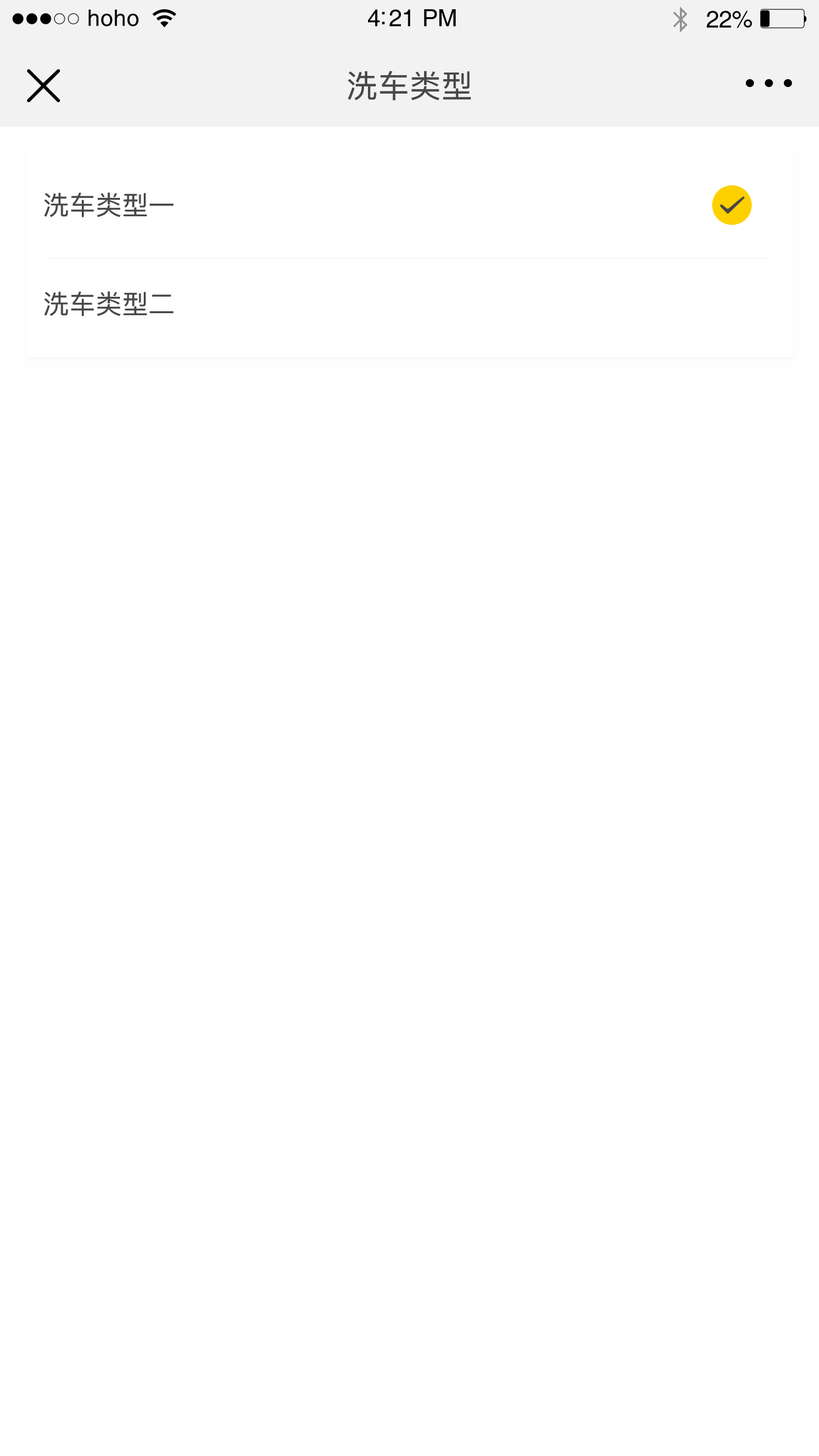
<style>
.page{position:relative;width:819px;height:1456px;background:#fffeff}
.page>*{position:absolute;margin:0}
.t1{font:22.8px "Helvetica";letter-spacing:0.02em;color:#000000}
.t2{font:23.8px "Helvetica";letter-spacing:-0.02em;color:#000000}
.t3{font:31.7px "PingFang-SC-Medium";color:#474747}
.t4{font:26.4px "PingFang-SC-Medium";color:#474747}
</style>
<div class="page">
<p class="t1" style="left:88px;top:9px;width:50px;height:17px">hoho</p>
<p class="t2" style="left:368px;top:9px;width:88px;height:17px">4:21 PM</p>
<p class="t2" style="left:706px;top:11px;width:46px;height:17px">22%</p>
<p class="t3" style="left:348px;top:71px;width:123px;height:29px">洗车类型</p>
<p class="t4" style="left:44px;top:193px;width:129px;height:25px">洗车类型一</p>
<p class="t4" style="left:44px;top:291px;width:129px;height:26px">洗车类型二</p>
</div>
